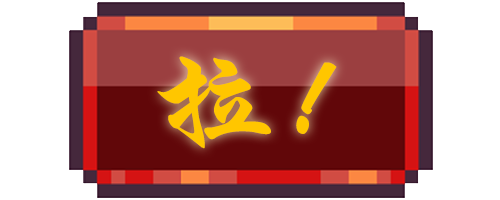
<style>
.page{position:relative;width:500px;height:200px;background:#ffffff}
.page>*{position:absolute;margin:0}
.t1{font:115.4px "STXingkai";color:#ffc600;scale:1.14 1}
</style>
<div class="page">
<p class="t1" style="left:157px;top:56px;width:180px;height:93px">拉！</p>
</div>
